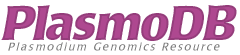
<style>
.page{position:relative;width:240px;height:55px;background:#ffffff}
.page>*{position:absolute;margin:0}
.t1{font:48px "PopplLaudatio-Bold";letter-spacing:-0.025em;color:#a7458a;font-style:italic}
</style>
<div class="page">
<p class="t1" style="left:1px;top:5px;width:236px;height:36px">PlasmoDB</p>
</div>
